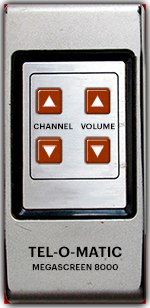
<style>
.page{position:relative;width:150px;height:308px}
.page>*{position:absolute;margin:0}
.t1{font:8px "Graphik-Semibold";letter-spacing:0.01em;color:#000000}
.t2{font:14.3px "Graphik-Semibold";letter-spacing:0.01em;color:#000000}
.t3{font:8.6px "Graphik-Semibold";letter-spacing:0.01em;color:#000000}
</style>
<div class="page">
<p class="t1" style="left:33px;top:123px;width:40px;height:7px">CHANNEL</p>
<p class="t1" style="left:80px;top:123px;width:35px;height:7px">VOLUME</p>
<p class="t2" style="left:28px;top:246px;width:94px;height:12px">TEL-O-MATIC</p>
<p class="t3" style="left:32px;top:264px;width:86px;height:7px">MEGASCREEN 8000</p>
</div>
